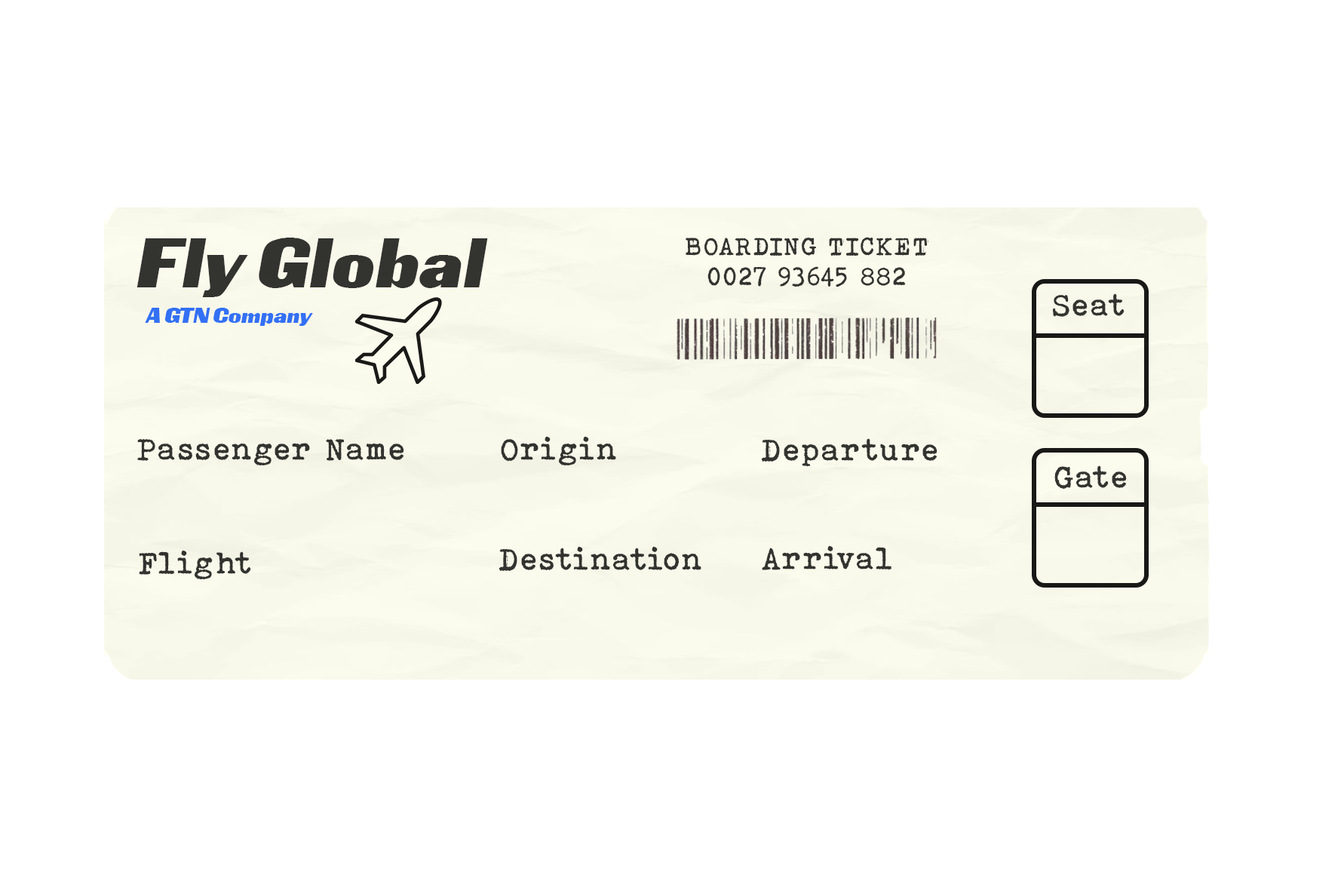
<style>
.page{position:relative;width:1344px;height:887px;background:#ffffff}
.page>*{position:absolute;margin:0}
.t1{font:62.4px "Airline";color:#33332f}
.t2{font:25.1px "BohemianTypewriter";color:#333330}
.t3{font:31.4px "BohemianTypewriter";color:#32322f}
.t4{font:18.9px "Airline";color:#3271f4}
.t5{font:31.4px "BohemianTypewriter";color:#33332f}
.t6{font:31.4px "BohemianTypewriter";color:#333330}
</style>
<div class="page">
<p class="t1" style="left:137px;top:238px;width:351px;height:59px">Fly Global</p>
<p class="t2" style="left:686px;top:237px;width:243px;height:50px;text-align:center">BOARDING TICKET<br>0027 93645 882</p>
<p class="t3" style="left:1052px;top:293px;width:73px;height:24px">Seat</p>
<p class="t4" style="left:145px;top:308px;width:168px;height:18px">A GTN Company</p>
<p class="t3" style="left:501px;top:436px;width:115px;height:30px">Origin</p>
<p class="t3" style="left:137px;top:439px;width:267px;height:27px">Passenger Name</p>
<p class="t5" style="left:761px;top:438px;width:177px;height:29px">Departure</p>
<p class="t6" style="left:1055px;top:465px;width:72px;height:25px">Gate</p>
<p class="t5" style="left:762px;top:545px;width:130px;height:25px">Arrival</p>
<p class="t3" style="left:139px;top:550px;width:112px;height:30px">Flight</p>
<p class="t3" style="left:499px;top:546px;width:203px;height:25px">Destination</p>
</div>
